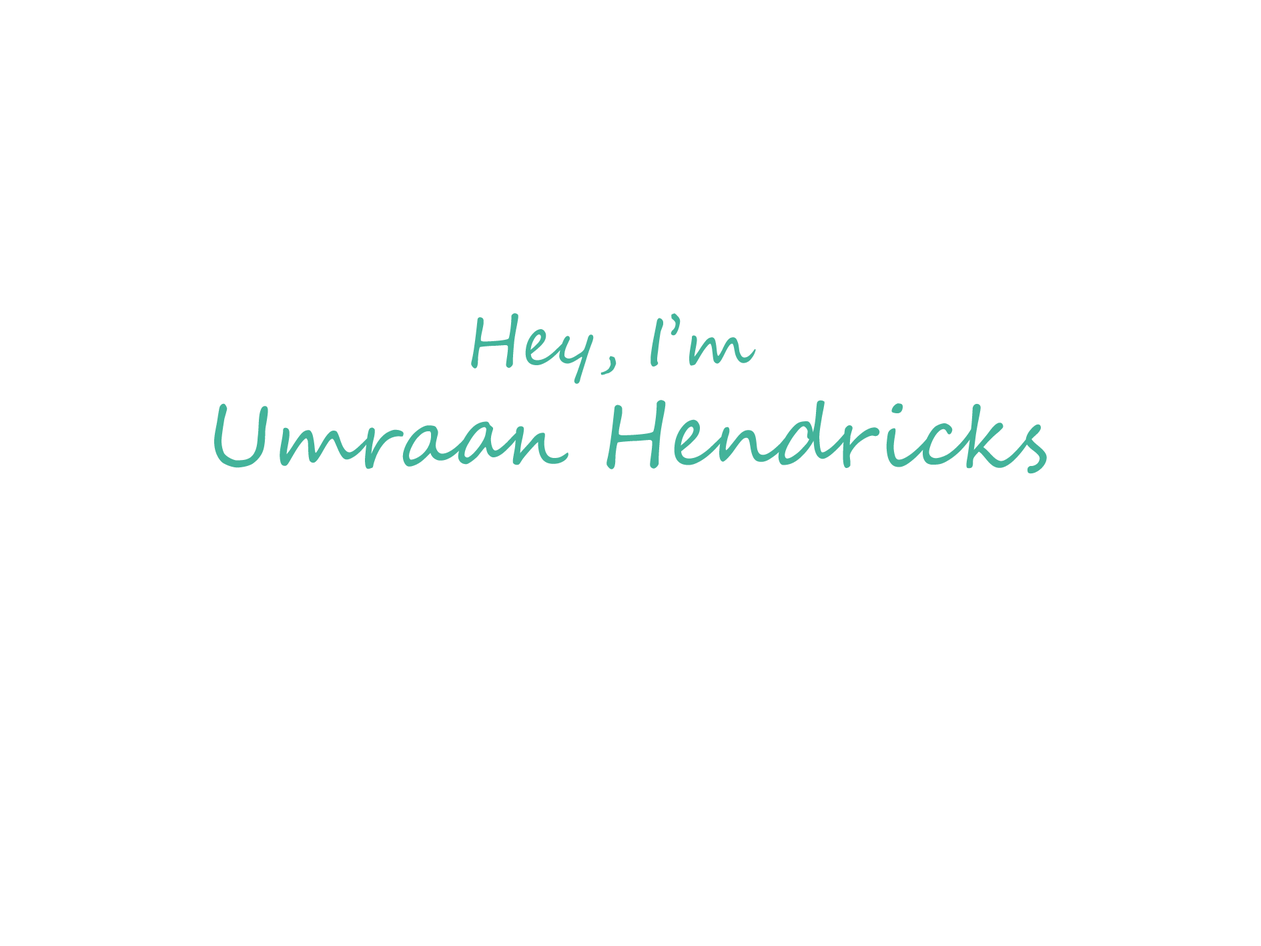
<style>
.page{position:relative;width:1261px;height:946px;background:#ffffff}
.page>*{position:absolute;margin:0}
.t1{font:83.4px "SegoeScript";color:#43b39a}
.t2{font:66.7px "SegoeScript";color:#43b39a}
</style>
<div class="page">
<p class="t1" style="left:214px;top:313px;width:833px;height:161px;text-align:center"><span class="t2">Hey, I’m</span> <br>Umraan Hendricks</p>
</div>
